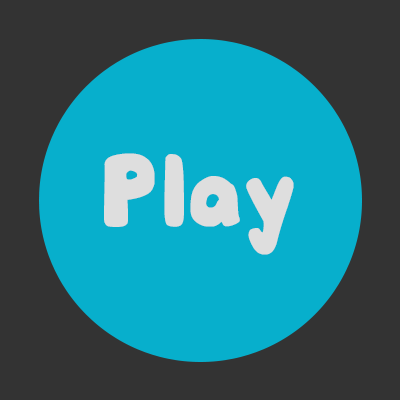
<style>
.page{position:relative;width:400px;height:400px;background:#333333}
.page>*{position:absolute;margin:0}
.t1{font:75.7px "DJBHUNKYCHUNK-Bold";color:#dedede}
</style>
<div class="page">
<p class="t1" style="left:104px;top:153px;width:190px;height:102px">Play</p>
</div>
